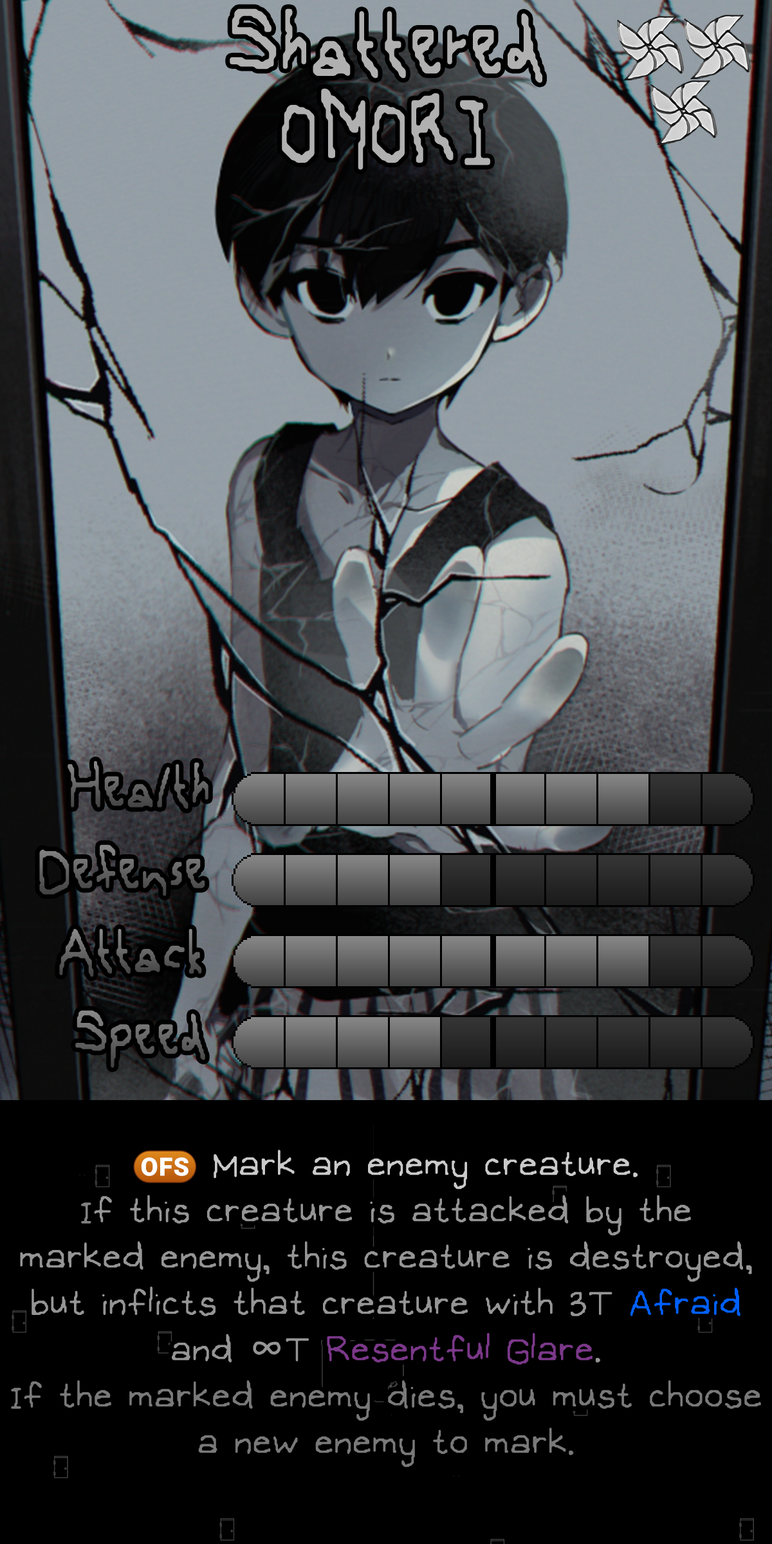
<style>
.page{position:relative;width:772px;height:1544px;background:#000000}
.page>*{position:absolute;margin:0}
.t1{font:193px/86.9px "OMORI_GAME2";color:#b0b0b0}
.t2{font:128.7px "OMORI_GAME2";color:#5f5f5f}
.t3{font:128.7px "OMORI_GAME2";color:#676767}
.t4{font:52.9px/46.3px "OMORI_GAME";color:#959595}
.t5{font:33.1px/46.3px "stoogedings-Regular";color:#cacaca}
.t6{font:52.9px/46.3px "OMORI_GAME";color:#cacaca}
.t7{font:52.9px/46.3px "OMORI_GAME";color:#818181}
.t8{font:52.9px/46.3px "OMORI_GAME";color:#0060ff}
.t9{font:36px/46.3px "uzura_font";color:#959595}
.t10{font:52.9px/46.3px "OMORI_GAME";color:#7b388a}
.t11{font:52.9px/46.3px "OMORI_GAME";color:#797979}
</style>
<div class="page">
<p class="t1" style="left:230px;top:8px;width:312px;height:162px;text-align:center">Shattered<br>OMORI</p>
<p class="t2" style="left:68px;top:761px;width:140px;height:48px">Health</p>
<p class="t2" style="left:39px;top:845px;width:166px;height:51px">Defense</p>
<p class="t2" style="left:59px;top:929px;width:143px;height:48px">Attack</p>
<p class="t3" style="left:75px;top:1010px;width:130px;height:58px">Speed</p>
<p class="t4" style="left:11px;top:1150px;width:750px;height:318px;text-align:center"><span class="t5">(OFS)</span><span class="t6"> Mark an enemy creature.<br></span><span class="t7">I</span>f this creature is attacked by the marked enemy, this creature is destroyed, but inflicts that creature with 3T <span class="t8">Afraid</span> and <span class="t9">∞</span>T <span class="t10">Resentful Glare</span>.<br><span class="t11">If the marked enemy dies, you must choose a new enemy to mark.</span></p>
</div>
